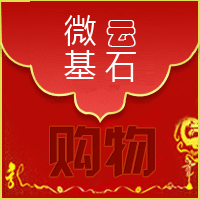
<style>
.page{position:relative;width:200px;height:200px}
.page>*{position:absolute;margin:0}
.t1{font:31.8px "MicrosoftYaHei";color:#ffffff}
.t2{font:31.8px "STCaiyun";color:#ffffff}
</style>
<div class="page">
<p class="t1" style="left:64px;top:15px;width:72px;height:32px">微 <span class="t2">云</span></p>
<p class="t1" style="left:64px;top:50px;width:72px;height:32px">基 石</p>
</div>
